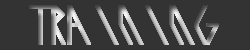
<style>
.page{position:relative;width:250px;height:50px;background:#333333}
.page>*{position:absolute;margin:0}
.t1{font:48px "exoziti";font-weight:bold}
</style>
<div class="page">
<p class="t1" style="left:29px;top:5px;width:190px;height:40px">TRAINING</p>
</div>
